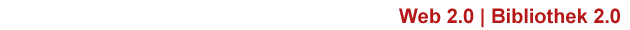
<style>
.page{position:relative;width:630px;height:30px;background:#ffffff}
.page>*{position:absolute;margin:0}
.t1{font:20px "Arial-BoldMT";color:#b61717}
.t2{font:18px "ArialMT";color:#b61717}
</style>
<div class="page">
<p class="t1" style="left:399px;top:8px;width:221px;height:20px"><span class="t2">                         </span>Web 2.0 | Bibliothek 2.0</p>
</div>
